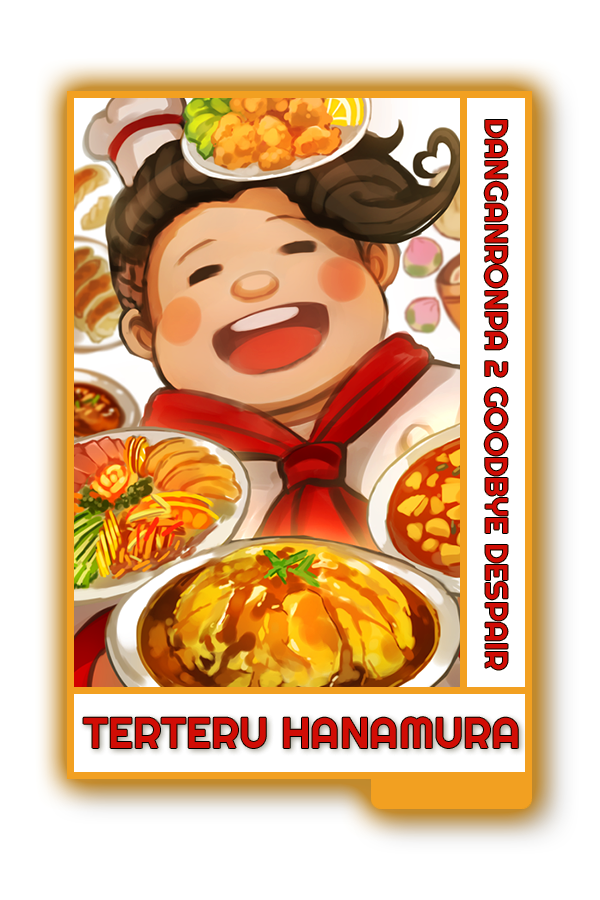
<style>
.page{position:relative;width:600px;height:900px;background:#ffffff}
.page>*{position:absolute;margin:0}
.t1{font:31.2px "Righteous-Regular";color:#cb1511}
.t2{font:43.2px "Righteous-Regular";color:#cb1511}
</style>
<div class="page">
<p class="t1" style="left:484px;top:120px;width:24px;height:550px;rotate:90deg">DANGANRONPA 2 GOODBYE DESPAIR</p>
<p class="t2" style="left:83px;top:717px;width:435px;height:31px">TERTERU HANAMURA</p>
</div>
